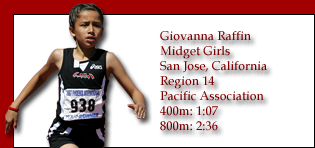
<style>
.page{position:relative;width:315px;height:148px;background:#ffffff}
.page>*{position:absolute;margin:0}
.t1{font:12.5px "BookAntiqua";color:#7b0002}
</style>
<div class="page">
<p class="t1" style="left:160px;top:31px;width:107px;height:100px">Giovanna Raffin<br>Midget Girls<br>San Jose, California<br>Region 14<br>Pacific Association<br>400m: 1:07<br>800m: 2:36</p>
</div>
